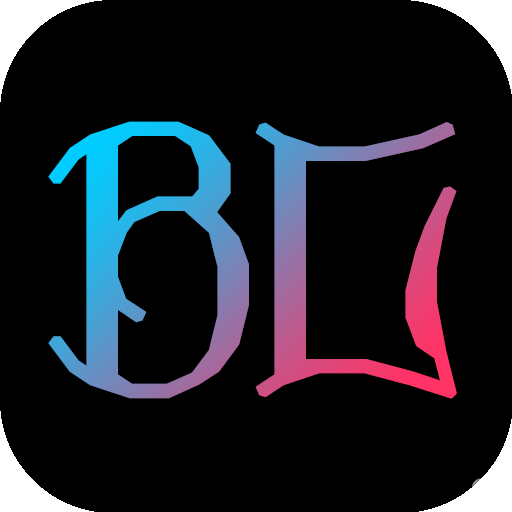
<style>
.page{position:relative;width:512px;height:512px;background:#000000}
.page>*{position:absolute;margin:0}
.t1{font:356.7px "GothicI";letter-spacing:-0.18em;font-weight:bold;scale:0.75 1}
</style>
<div class="page">
<p class="t1" style="left:48px;top:121px;width:409px;height:278px">BL</p>
</div>
